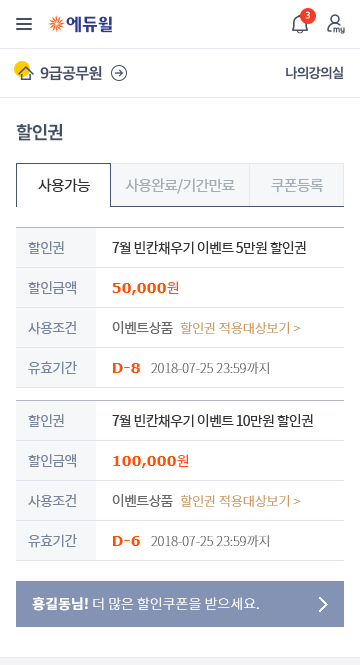
<style>
.page{position:relative;width:360px;height:665px;background:#ffffff}
.page>*{position:absolute;margin:0}
.t1{font:18px "NotoSansCJKkr-Bold";letter-spacing:-0.05em;color:#454f63}
.t2{font:15px "NotoSansCJKkr-Regular";letter-spacing:-0.05em;color:#333333}
.t3{font:15px "NotoSansCJKkr-Regular";letter-spacing:-0.05em;color:#a4acb5}
.t4{font:14px/40px "NotoSansCJKkr-Regular";letter-spacing:-0.05em;color:#78849e}
.t5{font:14px/40px "NotoSansCJKkr-Regular";letter-spacing:-0.05em;color:#333333}
.t6{font:14px/40px "Verdana-Bold";color:#ff5000}
.t7{font:14px/40px "NotoSansCJKkr-Regular";color:#ff5000}
.t8{font:14px/40px "NotoSansCJKkr-Regular";letter-spacing:-0.05em;color:#666666}
.t9{font:13px/20px "NotoSansCJKkr-Light";color:#cc9861}
.t10{font:13px/40px "NotoSansCJKkr-Thin";color:#666666}
.t11{font:14px "NotoSansCJKkr-Light";color:#ffffff}
.t12{font:14px "NotoSansCJKkr-Bold";color:#ffffff}
</style>
<div class="page">
<p class="t1" style="left:16px;top:124px;width:47px;height:17px">할인권</p>
<p class="t2" style="left:38px;top:178px;width:52px;height:14px">사용가능</p>
<p class="t3" style="left:125px;top:178px;width:110px;height:16px">사용완료/기간만료</p>
<p class="t3" style="left:271px;top:179px;width:52px;height:14px">쿠폰등록</p>
<p class="t4" style="left:28px;top:241px;width:49px;height:134px">할인권<br>할인금액<br>사용조건<br>유효기간</p>
<p class="t5" style="left:112px;top:241px;width:194px;height:133px">7월 빈칸채우기 이벤트 5만원 할인권<br><span class="t6">50,000</span><span class="t7">원<br></span><span class="t8">이벤트상품   </span><span class="t9">할인권 적용대상보기 &gt;<br></span><span class="t6">D-8  </span><span class="t10">2018-07-25 23:59까지</span></p>
<p class="t4" style="left:28px;top:414px;width:49px;height:134px">할인권<br>할인금액<br>사용조건<br>유효기간</p>
<p class="t5" style="left:112px;top:414px;width:201px;height:133px">7월 빈칸채우기 이벤트 10만원 할인권<br><span class="t6">100,000</span><span class="t7">원<br></span><span class="t8">이벤트상품   </span><span class="t9">할인권 적용대상보기 &gt;<br></span><span class="t6">D-6  </span><span class="t10">2018-07-25 23:59까지</span></p>
<p class="t11" style="left:32px;top:597px;width:227px;height:14px"><span class="t12">홍길동님! </span>더 많은 할인쿠폰을 받으세요.</p>
</div>
